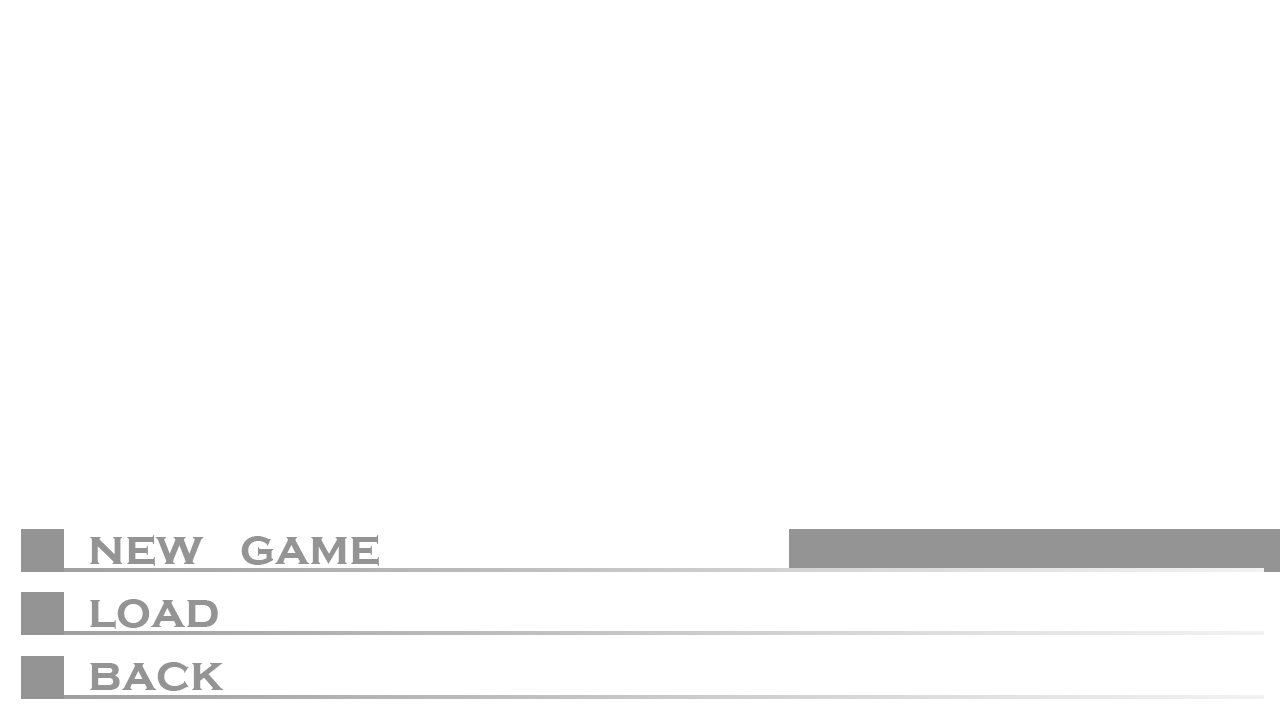
<style>
.page{position:relative;width:1280px;height:720px;background:#ffffff}
.page>*{position:absolute;margin:0}
.t1{font:49px "CopperplateGothic-Bold";color:#949494}
</style>
<div class="page">
<p class="t1" style="left:90px;top:535px;width:289px;height:31px">new   game</p>
<p class="t1" style="left:90px;top:599px;width:128px;height:30px">load</p>
<p class="t1" style="left:90px;top:662px;width:134px;height:29px">back</p>
</div>
